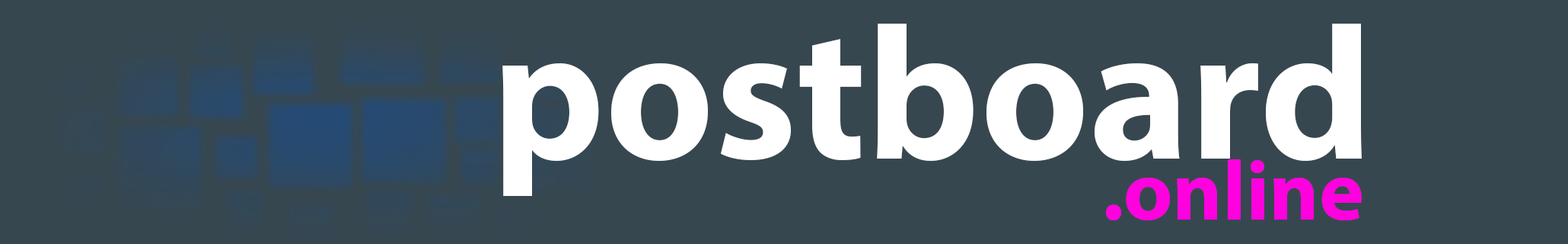
<style>
.page{position:relative;width:1568px;height:244px;background:#37474f}
.page>*{position:absolute;margin:0}
.t1{font:189.4px "MyriadPro-Bold";color:#ffffff}
.t2{font:85.1px "MyriadPro-Bold";color:#ff00de}
</style>
<div class="page">
<p class="t1" style="left:502px;top:24px;width:860px;height:172px">postboard</p>
<p class="t2" style="left:1106px;top:159px;width:256px;height:61px">.online</p>
</div>
